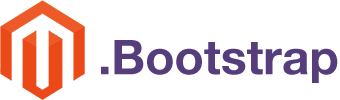
<style>
.page{position:relative;width:340px;height:100px;background:#ffffff}
.page>*{position:absolute;margin:0}
.t1{font:48px "HelveticaNeue-Bold";color:#563d7c}
</style>
<div class="page">
<p class="t1" style="left:101px;top:40px;width:237px;height:43px">.Bootstrap</p>
</div>
